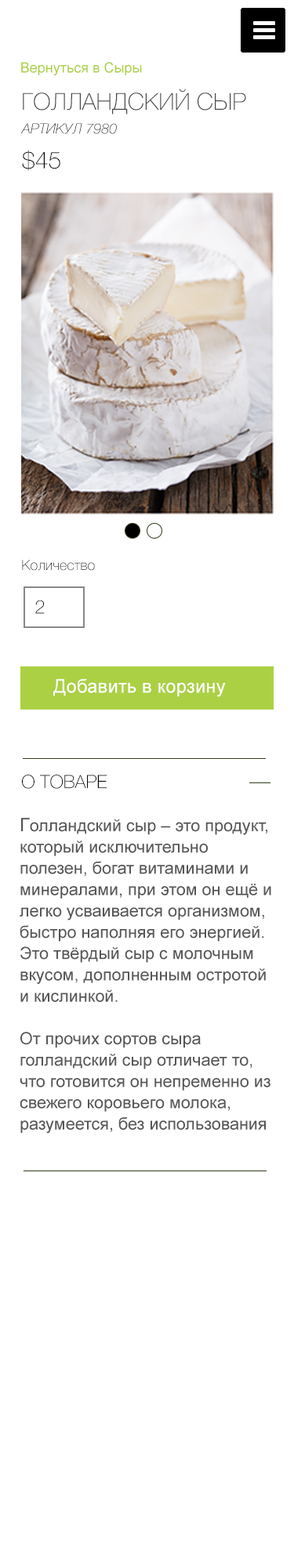
<style>
.page{position:relative;width:294px;height:1568px;background:#ffffff}
.page>*{position:absolute;margin:0}
.t1{font:14.1px "ArialMT";color:#abd044}
.t2{font:23.5px "HelveticaNeueCyr-Thin";color:#434343;text-transform:uppercase}
.t3{font:14.1px "HelveticaNeueCyr-ThinItalic";text-transform:uppercase}
.t4{font:23.5px "HelveticaNeueCyr-Thin";color:#000000;text-transform:uppercase}
.t5{font:14.1px "HelveticaNeueCyr-Thin";color:#010101}
.t6{font:18.8px "HelveticaNeueCyr-Thin";color:#000000;text-transform:uppercase}
.t7{font:18.8px "ArialMT";color:#ffffff}
.t8{font:18.4px "HelveticaNeueCyr-Thin";color:#000000;text-transform:uppercase}
.t9{font:16.9px/21.3px "ArialMT";color:#565656}
.t10{font:18.4px/21.3px "ArialMT";color:#565656}
.t11{font:16.9px/21.3px "TimesNewRomanPSMT";color:#000000}
</style>
<div class="page">
<p class="t1" style="left:21px;top:62px;width:121px;height:14px">Вернуться в Сыры</p>
<p class="t2" style="left:23px;top:89px;width:223px;height:25px">голландский сыр</p>
<p class="t3" style="left:20px;top:123px;width:97px;height:11px">артикул 7980</p>
<p class="t4" style="left:22px;top:150px;width:38px;height:21px">$45</p>
<p class="t5" style="left:22px;top:560px;width:73px;height:11px">Количество</p>
<p class="t6" style="left:35px;top:600px;width:10px;height:14px">2</p>
<p class="t7" style="left:53px;top:679px;width:173px;height:18px">Добавить в корзину</p>
<p class="t8" style="left:22px;top:775px;width:85px;height:14px">о товаре</p>
<p class="t9" style="left:20px;top:818px;width:251px;height:316px"><span class="t10">Г</span>олландский сыр – это продукт, который исключительно полезен, богат витаминами и минералами, при этом он ещё и легко усваивается организмом, быстро наполняя его энергией. Это твёрдый сыр с молочным вкусом, дополненным остротой и кислинкой.<br><br>От прочих сортов сыра голландский сыр отличает то, что готовится он непременно из свежего коровьего молока, разумеется, без использования <span class="t11">растительных аналогов или других примесей.</span></p>
</div>
